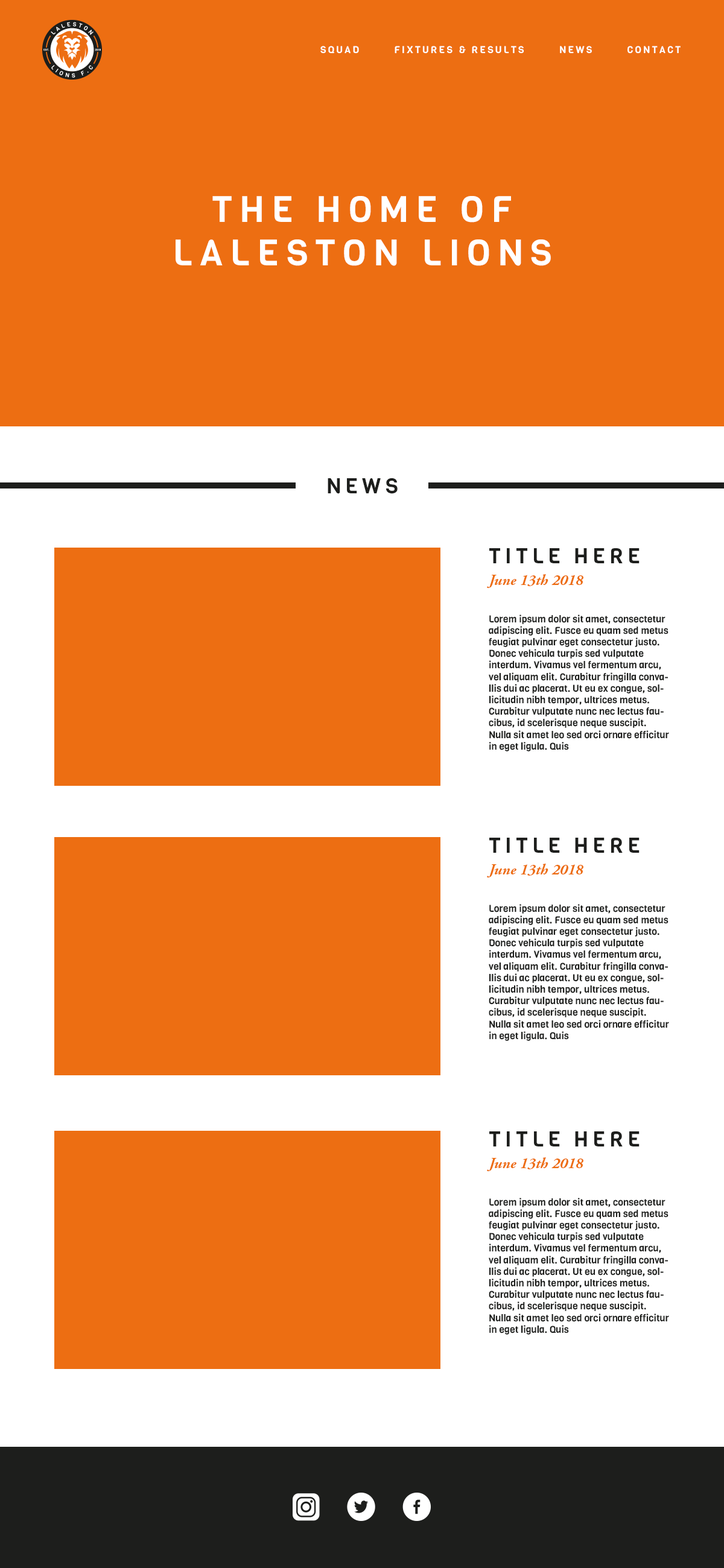
<style>
.page{position:relative;width:724px;height:1568px;background:#ed6e12}
.page>*{position:absolute;margin:0}
.t1{font:9.6px "Viga-Regular";letter-spacing:0.2em;color:#ffffff;text-transform:uppercase}
.t2{font:36.2px "Viga-Regular";letter-spacing:0.2em;color:#ffffff}
.t3{font:21.1px "Viga-Regular";letter-spacing:0.2em;color:#1d1e1c}
.t4{font:9.6px "Viga-Regular";color:#1d1e1c}
.t5{font:15.1px/21.7px "AGaramondPro-BoldItalic";color:#ed6e12}
</style>
<div class="page">
<p class="t1" style="left:320px;top:46px;width:360px;height:8px">SQUAD        FIXTURES &amp; RESULTS        NEWS        CONTACT</p>
<p class="t2" style="left:175px;top:196px;width:376px;height:70px;text-align:center">THE HOME OF <br>LALESTON LIONS</p>
<p class="t3" style="left:327px;top:478px;width:70px;height:16px">NEWS</p>
<p class="t4" style="left:487px;top:548px;width:182px;height:203px"><span class="t3">TITLE HERE<br></span><span class="t5">June 13th 2018<br><br></span>Lorem ipsum dolor sit amet, consectetur adipiscing elit. Fusce eu quam sed metus feugiat pulvinar eget consectetur justo. Donec vehicula turpis sed vulputate interdum. Vivamus vel fermentum arcu, vel aliquam elit. Curabitur fringilla convallis dui ac placerat. Ut eu ex congue, sollicitudin nibh tempor, ultrices metus. Curabitur vulputate nunc nec lectus faucibus, id scelerisque neque suscipit. Nulla sit amet leo sed orci ornare efficitur in eget ligula. Quis</p>
<p class="t4" style="left:487px;top:838px;width:182px;height:203px"><span class="t3">TITLE HERE<br></span><span class="t5">June 13th 2018<br><br></span>Lorem ipsum dolor sit amet, consectetur adipiscing elit. Fusce eu quam sed metus feugiat pulvinar eget consectetur justo. Donec vehicula turpis sed vulputate interdum. Vivamus vel fermentum arcu, vel aliquam elit. Curabitur fringilla convallis dui ac placerat. Ut eu ex congue, sollicitudin nibh tempor, ultrices metus. Curabitur vulputate nunc nec lectus faucibus, id scelerisque neque suscipit. Nulla sit amet leo sed orci ornare efficitur in eget ligula. Quis</p>
<p class="t4" style="left:487px;top:1131px;width:182px;height:204px"><span class="t3">TITLE HERE<br></span><span class="t5">June 13th 2018<br><br></span>Lorem ipsum dolor sit amet, consectetur adipiscing elit. Fusce eu quam sed metus feugiat pulvinar eget consectetur justo. Donec vehicula turpis sed vulputate interdum. Vivamus vel fermentum arcu, vel aliquam elit. Curabitur fringilla convallis dui ac placerat. Ut eu ex congue, sollicitudin nibh tempor, ultrices metus. Curabitur vulputate nunc nec lectus faucibus, id scelerisque neque suscipit. Nulla sit amet leo sed orci ornare efficitur in eget ligula. Quis</p>
</div>
